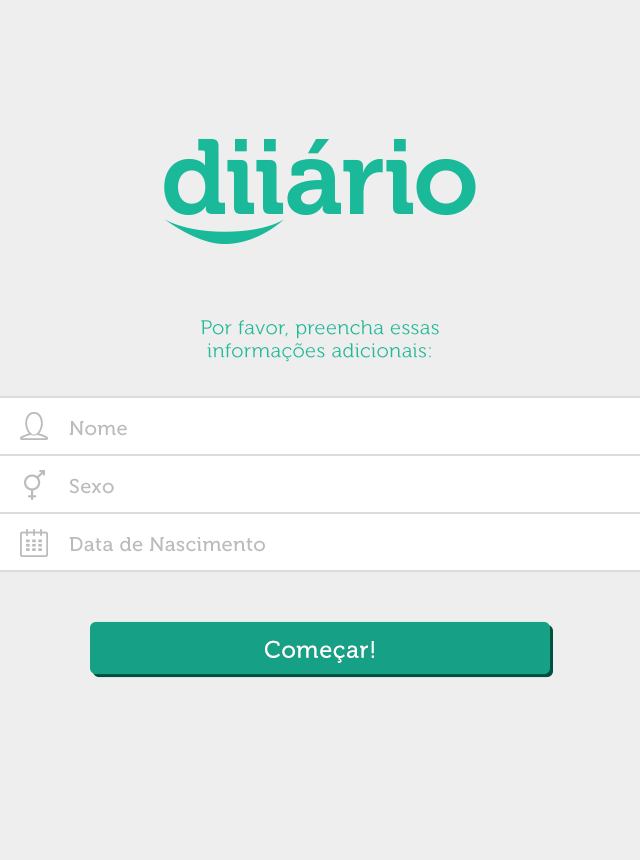
<style>
.page{position:relative;width:640px;height:860px;background:#eeeeee}
.page>*{position:absolute;margin:0}
.t1{font:20px/23px "Museo300-Regular";letter-spacing:0.02em;color:#1abc9c}
.t2{font:20px "Museo500-Regular";letter-spacing:0.02em;color:#bbbbbb}
.t3{font:23.8px "Museo500-Regular";letter-spacing:0.02em;color:#ffffff}
</style>
<div class="page">
<p class="t1" style="left:201px;top:320px;width:238px;height:42px;text-align:center">Por favor, preencha essas<br>informações adicionais:</p>
<p class="t2" style="left:69px;top:421px;width:58px;height:15px">Nome</p>
<p class="t2" style="left:69px;top:478px;width:45px;height:16px">Sexo</p>
<p class="t2" style="left:69px;top:537px;width:196px;height:15px">Data de Nascimento</p>
<p class="t3" style="left:265px;top:640px;width:109px;height:23px">Começar!</p>
</div>
